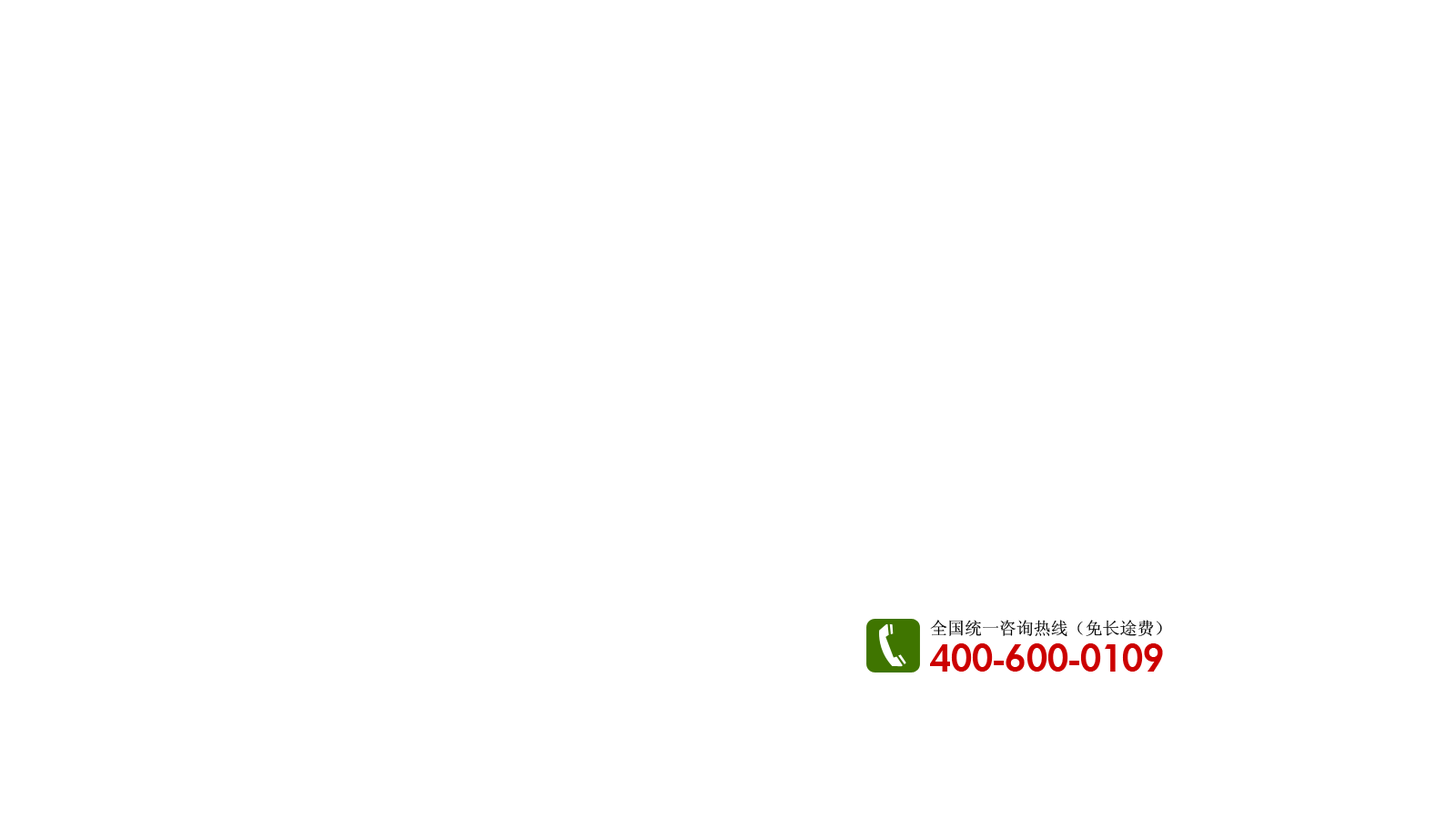
<style>
.page{position:relative;width:1456px;height:819px;background:#ffffff}
.page>*{position:absolute;margin:0}
.t1{font:17.2px "SimSun";color:#000000}
.t2{font:36.3px "Futura-Heavy";color:#cc0000}
</style>
<div class="page">
<p class="t1" style="left:930px;top:620px;width:232px;height:17px">全国统一咨询热线（免长途费）</p>
<p class="t2" style="left:930px;top:643px;width:233px;height:29px">400-600-0109</p>
</div>
